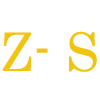
<style>
.page{position:relative;width:100px;height:100px;background:#ffffff}
.page>*{position:absolute;margin:0}
.t1{font:53px "Century";color:#f1c40f}
</style>
<div class="page">
<p class="t1" style="left:2px;top:31px;width:95px;height:41px">Z- S</p>
</div>
